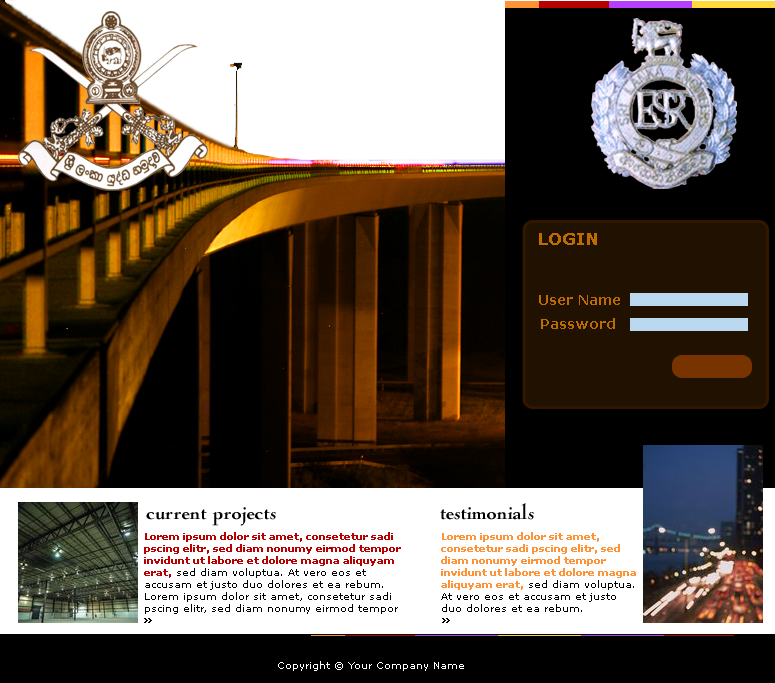
<style>
.page{position:relative;width:775px;height:683px;background:#ffffff}
.page>*{position:absolute;margin:0}
.t1{font:16.7px "Verdana-Bold";color:#bc6c00}
.t2{font:14.2px "Verdana-Bold";color:#bc6c00}
.t3{font:23px "NicolasCocTEE-Blac";color:#000000}
.t4{font:10px "Verdana";color:#000000}
.t5{font:10px "Verdana-Bold";color:#b90000}
.t6{font:10px "Verdana-Bold";color:#ff9235}
.t7{font:10px "Verdana";color:#ffffff}
</style>
<div class="page">
<p class="t1" style="left:539px;top:233px;width:58px;height:12px">LOGIN</p>
<p class="t2" style="left:539px;top:295px;width:81px;height:10px">User Name</p>
<p class="t2" style="left:541px;top:318px;width:74px;height:11px">Password</p>
<p class="t3" style="left:146px;top:507px;width:130px;height:19px">current projects</p>
<p class="t3" style="left:440px;top:503px;width:94px;height:17px">testimonials</p>
<p class="t4" style="left:144px;top:532px;width:257px;height:82px"><span class="t5">Lorem ipsum dolor sit amet, consetetur sadi pscing elitr, sed diam nonumy eirmod tempor invidunt ut labore et dolore magna aliquyam erat,</span> sed diam voluptua. At vero eos et accusam et justo duo dolores et ea rebum. Lorem ipsum dolor sit amet, consetetur sadi pscing elitr, sed diam nonumy eirmod tempor</p>
<p class="t6" style="left:441px;top:532px;width:195px;height:80px">Lorem ipsum dolor sit amet, consetetur sadi pscing elitr, sed diam nonumy eirmod tempor invidunt ut labore et dolore magna aliquyam erat, <span class="t4">sed diam voluptua. At vero eos et accusam et justo duo dolores et ea rebum.</span></p>
<p class="t7" style="left:278px;top:661px;width:186px;height:10px">Copyright © Your Company Name</p>
</div>
